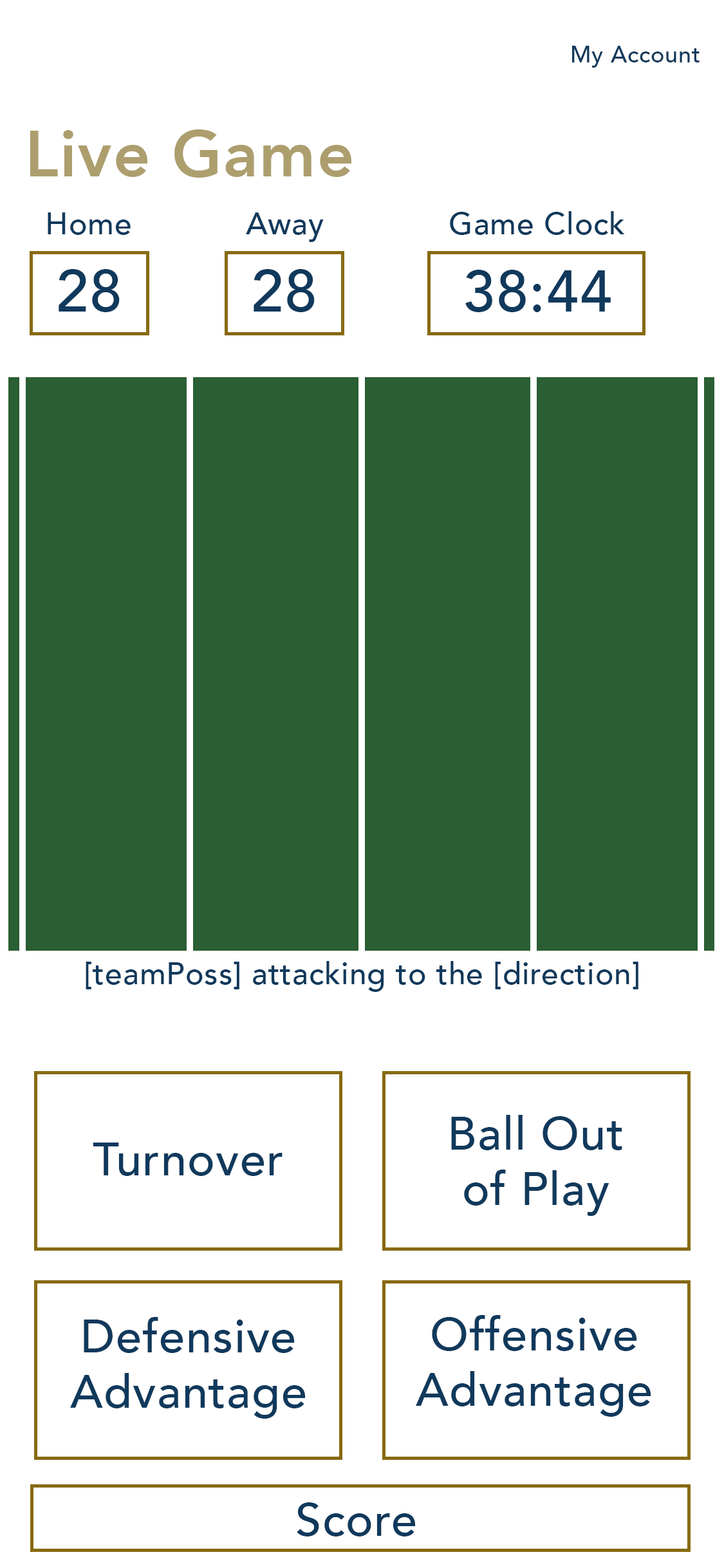
<style>
.page{position:relative;width:724px;height:1568px;background:#ffffff}
.page>*{position:absolute;margin:0}
.t1{font:23.2px "Avenir-Medium";letter-spacing:0.021em;color:#10395c}
.t2{font:64.6px "Avenir-Heavy";letter-spacing:0.021em;color:#ad9e6e}
.t3{font:30.9px "Avenir-Medium";letter-spacing:0.021em;color:#10395c}
.t4{font:58.4px "Avenir-Medium";letter-spacing:0.021em;color:#10395c}
.t5{font:57.9px "Avenir-Medium";letter-spacing:0.021em;color:#10395c}
.t6{font:46.3px "Avenir-Medium";letter-spacing:0.021em;color:#10395c}
</style>
<div class="page">
<p class="t1" style="left:572px;top:46px;width:128px;height:22px">My Account</p>
<p class="t2" style="left:30px;top:129px;width:321px;height:49px">Live Game</p>
<p class="t3" style="left:48px;top:212px;width:83px;height:23px">Home</p>
<p class="t3" style="left:246px;top:212px;width:78px;height:30px">Away</p>
<p class="t3" style="left:450px;top:211px;width:175px;height:24px">Game Clock</p>
<p class="t4" style="left:59px;top:269px;width:61px;height:43px">28</p>
<p class="t4" style="left:254px;top:269px;width:61px;height:43px">28</p>
<p class="t5" style="left:465px;top:270px;width:146px;height:42px">38:44</p>
<p class="t3" style="left:86px;top:961px;width:553px;height:31px">[teamPoss] attacking to the [direction]</p>
<p class="t6" style="left:451px;top:1115px;width:171px;height:101px;text-align:center">Ball Out<br>of Play</p>
<p class="t6" style="left:93px;top:1143px;width:190px;height:33px">Turnover</p>
<p class="t6" style="left:70px;top:1317px;width:236px;height:102px;text-align:center">Defensive<br>Advantage</p>
<p class="t6" style="left:416px;top:1315px;width:235px;height:102px;text-align:center">Offensive<br>Advantage</p>
<p class="t6" style="left:297px;top:1502px;width:119px;height:34px">Score</p>
</div>
